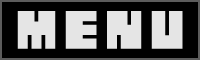
<style>
.page{position:relative;width:200px;height:60px;background:#000000}
.page>*{position:absolute;margin:0}
.t1{font:55px "Blocked";color:#000000}
</style>
<div class="page">
<p class="t1" style="left:14px;top:7px;width:172px;height:46px">menu</p>
</div>
